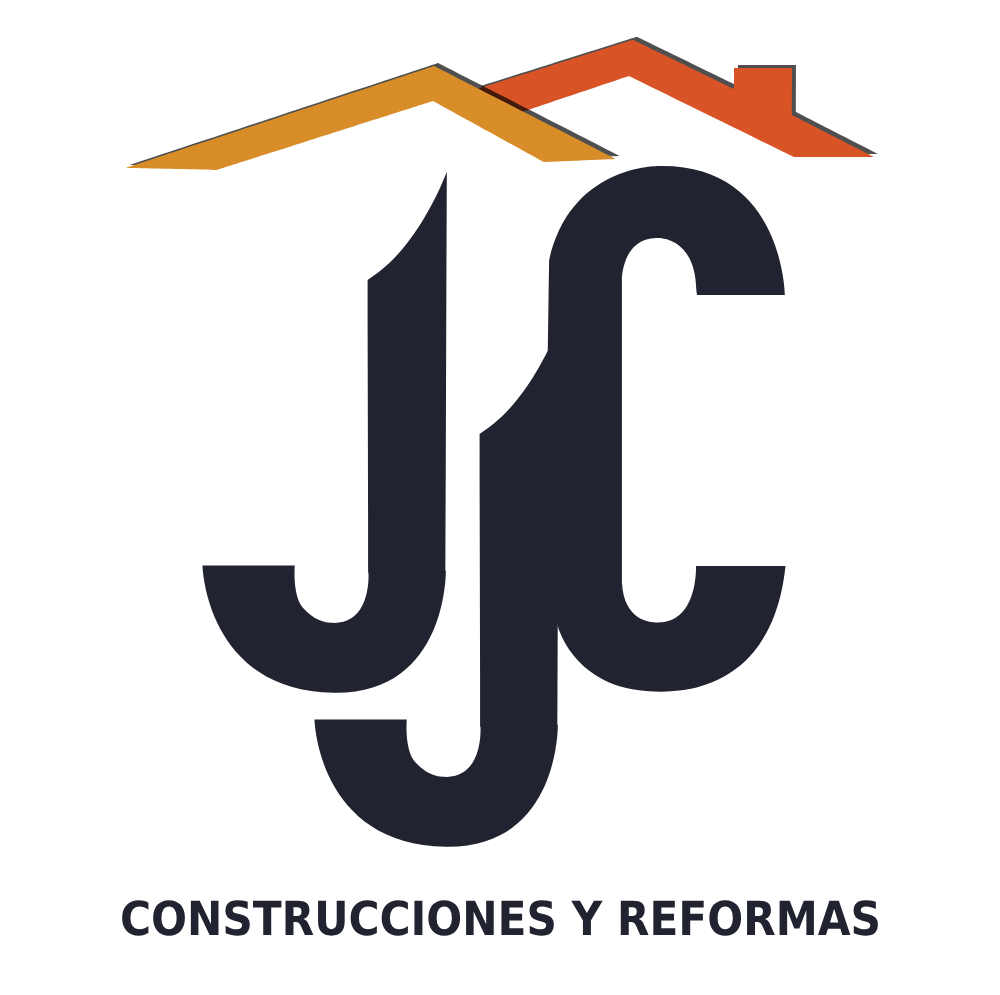
<style>
.page{position:relative;width:1000px;height:995px;background:#ffffff}
.page>*{position:absolute;margin:0}
.t1{font:47px "DejaVuSansCondensed-Bold";color:#222331}
</style>
<div class="page">
<p class="t1" style="left:122px;top:900px;width:756px;height:36px">CONSTRUCCIONES Y REFORMAS</p>
</div>
